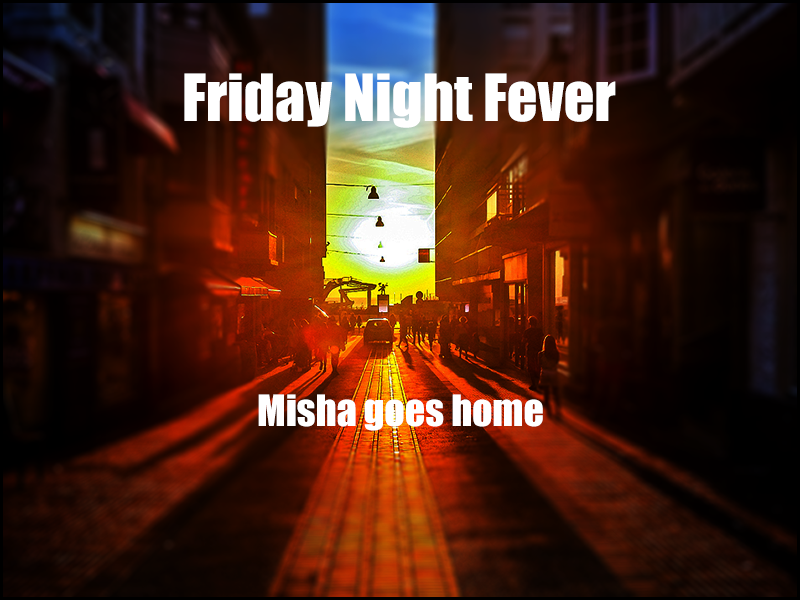
<style>
.page{position:relative;width:800px;height:600px}
.page>*{position:absolute;margin:0}
.t1{font:60px "Impact";color:#ffffff}
.t2{font:40px "Impact";color:#ffffff}
</style>
<div class="page">
<p class="t1" style="left:184px;top:73px;width:432px;height:55px">Friday Night Fever</p>
<p class="t2" style="left:258px;top:394px;width:285px;height:37px">Misha goes home</p>
</div>
